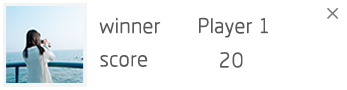
<style>
.page{position:relative;width:347px;height:90px;background:#ffffff}
.page>*{position:absolute;margin:0}
.t1{font:22px "MFYueYuan_Noncommercial-Regular";letter-spacing:-0.02em;color:#5a5a5a}
</style>
<div class="page">
<p class="t1" style="left:99px;top:17px;width:170px;height:21px">winner       Player 1</p>
<p class="t1" style="left:220px;top:52px;width:23px;height:16px">20</p>
<p class="t1" style="left:100px;top:55px;width:48px;height:12px">score</p>
</div>
